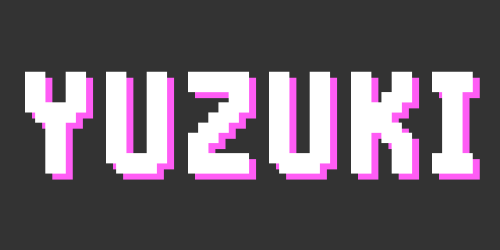
<style>
.page{position:relative;width:500px;height:250px;background:#333333}
.page>*{position:absolute;margin:0}
.t1{font:132.3px "Bionicle-training-card-font-2.4";color:#ffffff}
</style>
<div class="page">
<p class="t1" style="left:25px;top:71px;width:448px;height:103px">YUZUKI</p>
<p class="t1" style="left:32px;top:77px;width:448px;height:103px">YUZUKI</p>
</div>
